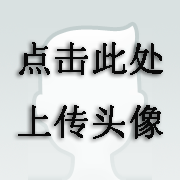
<style>
.page{position:relative;width:180px;height:180px}
.page>*{position:absolute;margin:0}
.t1{font:36px "SimSun";letter-spacing:0.01em;color:#090909;font-weight:bold}
</style>
<div class="page">
<p class="t1" style="left:18px;top:42px;width:145px;height:97px;text-align:center">点击此处<br>上传头像</p>
</div>
